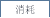
<style>
.page{position:relative;width:50px;height:18px;background:#ffffff}
.page>*{position:absolute;margin:0}
.t1{font:10px "SimSun"}
</style>
<div class="page">
<p class="t1" style="left:15px;top:4px;width:20px;height:10px">消耗</p>
</div>
